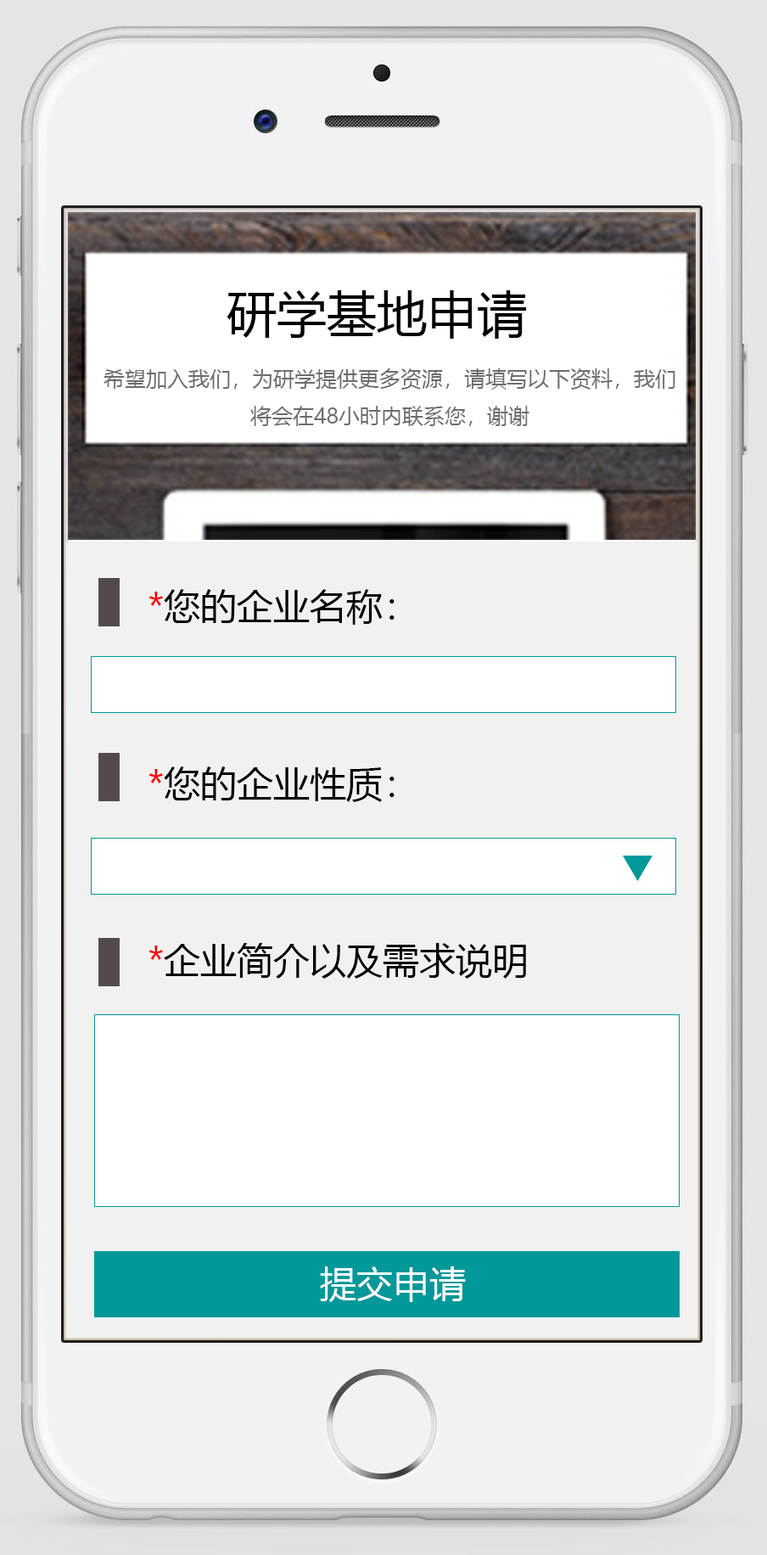
<style>
.page{position:relative;width:767px;height:1555px;background:#ffffff}
.page>*{position:absolute;margin:0}
.t1{font:50.1px "MicrosoftYaHei";color:#000000}
.t2{font:21.2px "MicrosoftYaHei";color:#6d6d6d}
.t3{font:36.5px "MicrosoftYaHei";color:#000000}
.t4{font:36.5px "MicrosoftYaHei";color:#ff0000}
.t5{font:36.5px "MicrosoftYaHei";color:#ffffff}
</style>
<div class="page">
<p class="t1" style="left:227px;top:290px;width:300px;height:49px">研学基地申请</p>
<p class="t2" style="left:104px;top:368px;width:571px;height:58px;text-align:center">希望加入我们，为研学提供更多资源，请填写以下资料，我们将会在48小时内联系您，谢谢</p>
<p class="t3" style="left:148px;top:589px;width:247px;height:36px"><span class="t4">*</span>您的企业名称：</p>
<p class="t3" style="left:148px;top:766px;width:247px;height:36px"><span class="t4">*</span>您的企业性质：</p>
<p class="t3" style="left:148px;top:943px;width:378px;height:94px"><span class="t4">*</span>企业简介以及需求说明<br>：</p>
<p class="t5" style="left:320px;top:1266px;width:146px;height:36px">提交申请</p>
</div>
